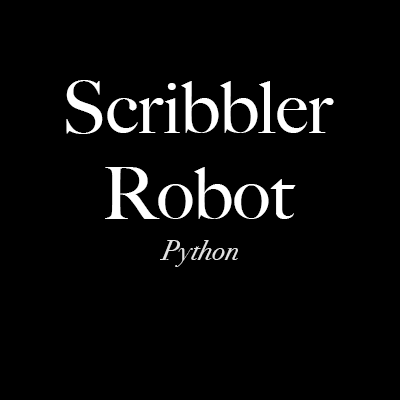
<style>
.page{position:relative;width:400px;height:400px;background:#000000}
.page>*{position:absolute;margin:0}
.t1{font:72px "BigCaslon-Medium";color:#ffffff}
.t2{font:28px "BodoniSvtyTwoITCTT-BookIta";color:#e1e1e1}
</style>
<div class="page">
<p class="t1" style="left:66px;top:80px;width:268px;height:139px;text-align:center">Scribbler<br>Robot</p>
<p class="t2" style="left:160px;top:240px;width:78px;height:27px">Python</p>
</div>
